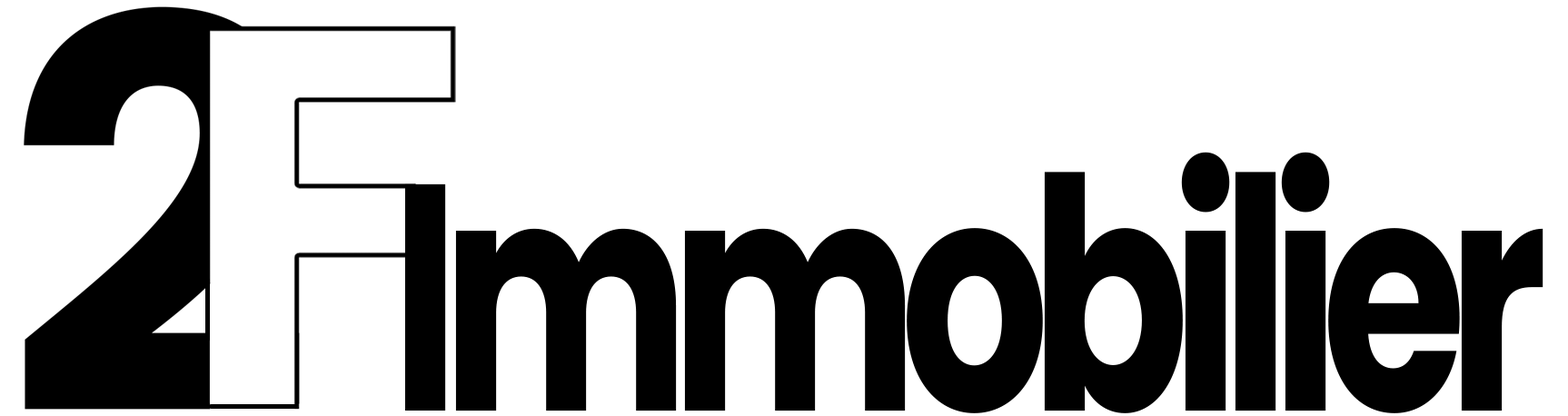
<style>
.page{position:relative;width:1568px;height:416px;background:#ffffff}
.page>*{position:absolute;margin:0}
.t1{font:322.3px "Poppins-Bold";letter-spacing:-0.08em;color:#000000;scale:0.73 1}
</style>
<div class="page">
<p class="t1" style="left:404px;top:152px;width:1139px;height:261px">Immobilier</p>
</div>
